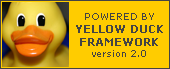
<style>
.page{position:relative;width:170px;height:69px;background:#ffcc00}
.page>*{position:absolute;margin:0}
.t1{font:11px "Verdana-Bold";color:#444444}
.t2{font:9px "Verdana";color:#444444}
</style>
<div class="page">
<p class="t1" style="left:76px;top:13px;width:87px;height:44px;text-align:center"><span class="t2">POWERED BY<br></span>YELLOW DUCK<br>FRAMEWORK<br><span class="t2">version 2.0</span></p>
</div>
